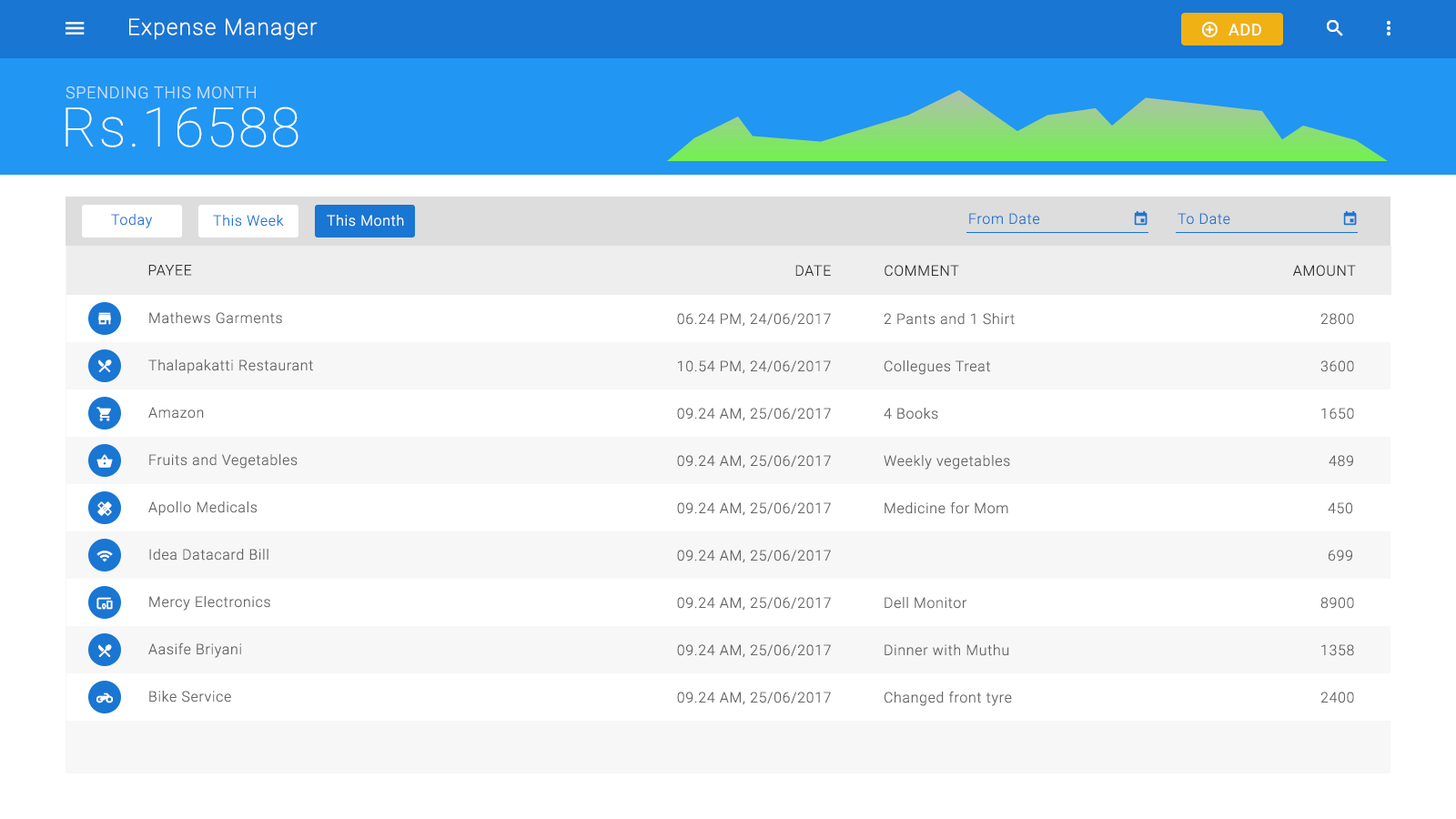
<style>
.page{position:relative;width:1456px;height:819px;background:#ffffff}
.page>*{position:absolute;margin:0}
.t1{font:21.8px "Roboto-Thin";letter-spacing:0.04em;color:#ffffff;font-weight:bold}
.t2{font:16.4px "Roboto-Regular";letter-spacing:0.04em;color:#ffffff}
.t3{font:16.4px "Roboto-Light";letter-spacing:0.04em;color:#c7dffb}
.t4{font:54.6px "Roboto-Thin";letter-spacing:0.04em;color:#ffffff}
.t5{font:14.6px "Roboto-Light";letter-spacing:0.04em;color:#1976d2}
.t6{font:14.6px "Roboto-Light";letter-spacing:0.04em;color:#ffffff}
.t7{font:14.6px "Roboto-Light";letter-spacing:0.04em;color:#333333}
.t8{font:14.6px "Roboto-Light";letter-spacing:0.04em;color:#666666}
</style>
<div class="page">
<p class="t1" style="left:129px;top:18px;width:189px;height:22px">Expense Manager</p>
<p class="t2" style="left:1228px;top:24px;width:33px;height:11px">ADD</p>
<p class="t3" style="left:66px;top:86px;width:190px;height:13px">SPENDING THIS MONTH</p>
<p class="t4" style="left:66px;top:106px;width:232px;height:41px">Rs.16588</p>
<p class="t5" style="left:111px;top:214px;width:42px;height:14px">Today</p>
<p class="t5" style="left:213px;top:215px;width:71px;height:12px">This Week</p>
<p class="t6" style="left:327px;top:215px;width:77px;height:12px">This Month</p>
<p class="t5" style="left:969px;top:213px;width:71px;height:12px">From Date</p>
<p class="t5" style="left:1178px;top:213px;width:52px;height:12px">To Date</p>
<p class="t7" style="left:148px;top:265px;width:44px;height:11px">PAYEE</p>
<p class="t7" style="left:795px;top:265px;width:36px;height:11px">DATE</p>
<p class="t7" style="left:885px;top:265px;width:74px;height:12px">COMMENT</p>
<p class="t7" style="left:1293px;top:265px;width:63px;height:12px">AMOUNT</p>
<p class="t8" style="left:149px;top:312px;width:133px;height:12px">Mathews Garments</p>
<p class="t8" style="left:677px;top:313px;width:154px;height:14px">06.24 PM, 24/06/2017</p>
<p class="t8" style="left:884px;top:313px;width:131px;height:12px">2 Pants and 1 Shirt</p>
<p class="t8" style="left:1320px;top:313px;width:34px;height:12px">2800</p>
<p class="t8" style="left:148px;top:359px;width:165px;height:15px">Thalapakatti Restaurant</p>
<p class="t8" style="left:678px;top:360px;width:153px;height:14px">10.54 PM, 24/06/2017</p>
<p class="t8" style="left:885px;top:360px;width:105px;height:15px">Collegues Treat</p>
<p class="t8" style="left:1320px;top:360px;width:34px;height:12px">3600</p>
<p class="t8" style="left:148px;top:407px;width:56px;height:12px">Amazon</p>
<p class="t8" style="left:677px;top:408px;width:154px;height:13px">09.24 AM, 25/06/2017</p>
<p class="t8" style="left:884px;top:408px;width:54px;height:12px">4 Books</p>
<p class="t8" style="left:1321px;top:408px;width:33px;height:12px">1650</p>
<p class="t8" style="left:149px;top:454px;width:149px;height:15px">Fruits and Vegetables</p>
<p class="t8" style="left:677px;top:455px;width:154px;height:14px">09.24 AM, 25/06/2017</p>
<p class="t8" style="left:884px;top:455px;width:126px;height:15px">Weekly vegetables</p>
<p class="t8" style="left:1329px;top:455px;width:24px;height:12px">489</p>
<p class="t8" style="left:148px;top:501px;width:110px;height:15px">Apollo Medicals</p>
<p class="t8" style="left:677px;top:502px;width:154px;height:14px">09.24 AM, 25/06/2017</p>
<p class="t8" style="left:885px;top:501px;width:123px;height:13px">Medicine for Mom</p>
<p class="t8" style="left:1328px;top:502px;width:24px;height:12px">450</p>
<p class="t8" style="left:149px;top:549px;width:119px;height:12px">Idea Datacard Bill</p>
<p class="t8" style="left:677px;top:550px;width:154px;height:13px">09.24 AM, 25/06/2017</p>
<p class="t8" style="left:1329px;top:550px;width:23px;height:11px">699</p>
<p class="t8" style="left:149px;top:596px;width:121px;height:15px">Mercy Electronics</p>
<p class="t8" style="left:677px;top:597px;width:154px;height:14px">09.24 AM, 25/06/2017</p>
<p class="t8" style="left:885px;top:597px;width:82px;height:12px">Dell Monitor</p>
<p class="t8" style="left:1320px;top:597px;width:34px;height:12px">8900</p>
<p class="t8" style="left:148px;top:642px;width:93px;height:16px">Aasife Briyani</p>
<p class="t8" style="left:677px;top:644px;width:154px;height:14px">09.24 AM, 25/06/2017</p>
<p class="t8" style="left:885px;top:644px;width:124px;height:12px">Dinner with Muthu</p>
<p class="t8" style="left:1321px;top:644px;width:33px;height:12px">1358</p>
<p class="t8" style="left:149px;top:691px;width:82px;height:12px">Bike Service</p>
<p class="t8" style="left:677px;top:692px;width:154px;height:13px">09.24 AM, 25/06/2017</p>
<p class="t8" style="left:885px;top:691px;width:127px;height:15px">Changed front tyre</p>
<p class="t8" style="left:1320px;top:692px;width:34px;height:11px">2400</p>
</div>
